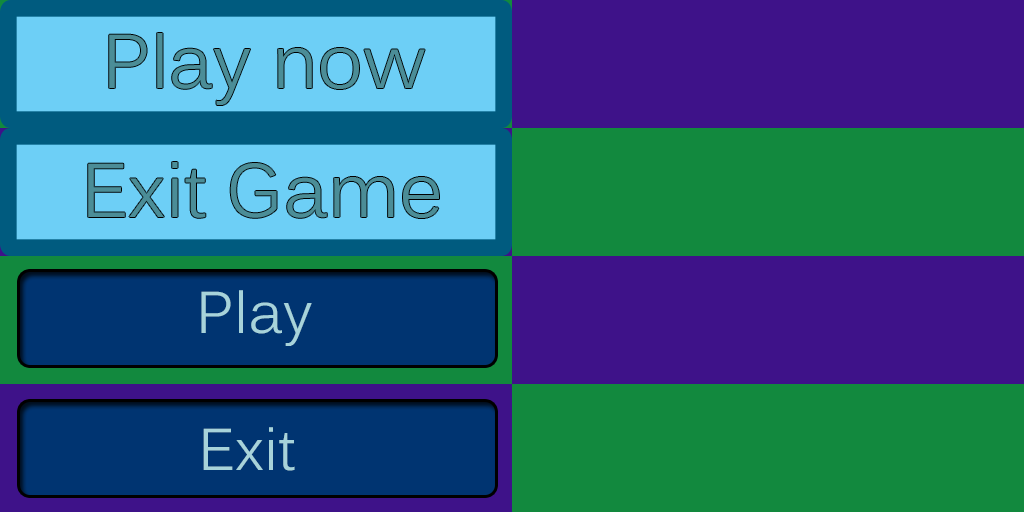
<style>
.page{position:relative;width:1024px;height:512px;background:#3e1289}
.page>*{position:absolute;margin:0}
.t1{font:75px "Kalinga";color:#4b8d97}
.t2{font:58.3px "Kalinga";color:#a7d3da}
</style>
<div class="page">
<p class="t1" style="left:109px;top:33px;width:316px;height:72px">Play now</p>
<p class="t1" style="left:88px;top:162px;width:351px;height:56px">Exit Game</p>
<p class="t2" style="left:201px;top:290px;width:111px;height:56px">Play</p>
<p class="t2" style="left:203px;top:427px;width:92px;height:44px">Exit</p>
</div>
